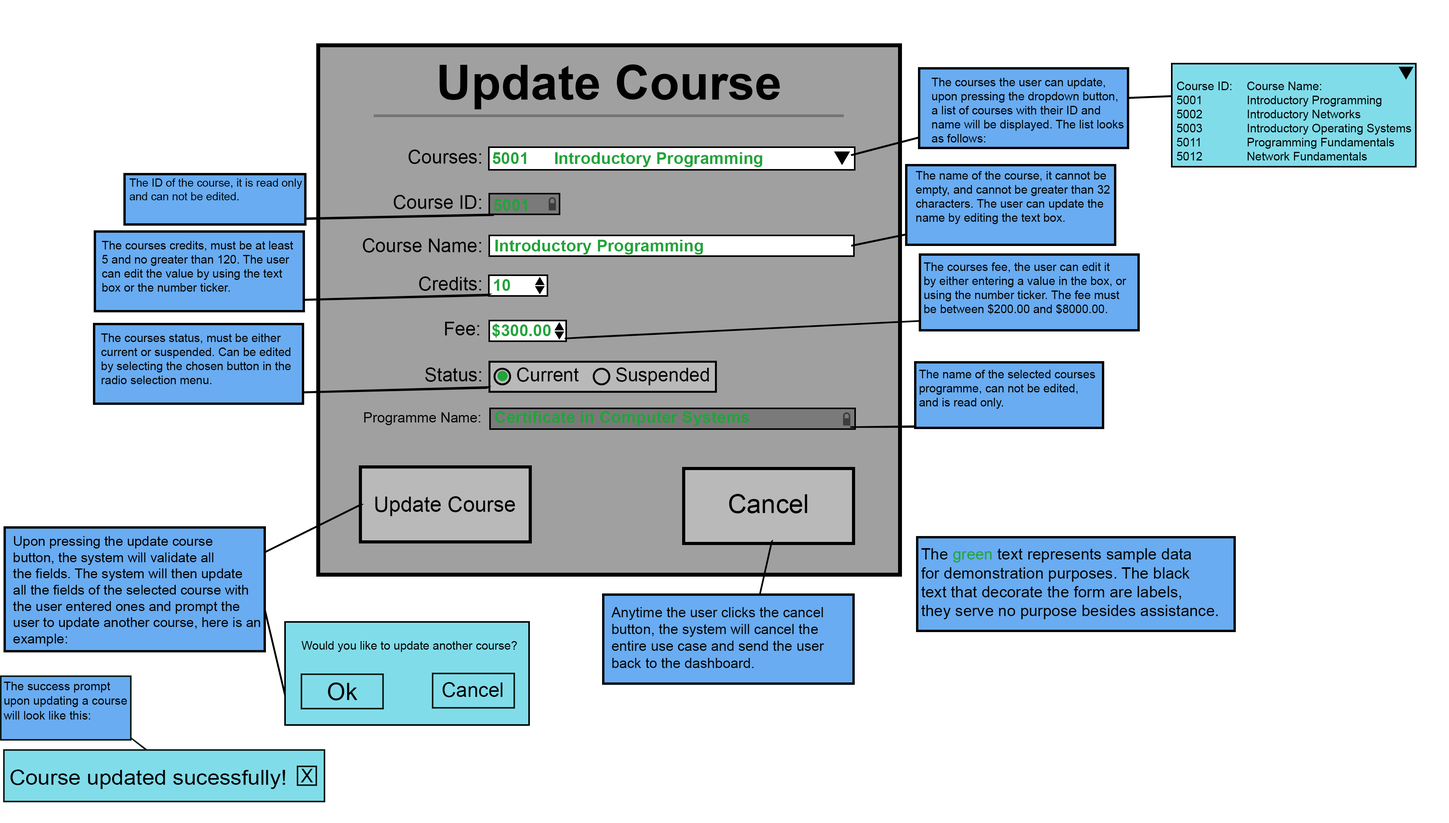
<style>
.page{position:relative;width:1449px;height:823px;background:#ffffff}
.page>*{position:absolute;margin:0}
.t1{font:48.6px "Arial-BoldMT";color:#000000}
.t2{font:11.7px "ArialMT";color:#000000}
.t3{font:18.7px "ArialMT";color:#000000}
.t4{font:16.5px "Arial-BoldMT";color:#21a439}
.t5{font:11.1px "ArialMT";color:#000000}
.t6{font:18.8px "ArialMT";color:#000000}
.t7{font:14.1px "ArialMT";color:#000000}
.t8{font:21.2px "ArialMT";color:#000000}
.t9{font:26px "ArialMT";color:#000000}
.t10{font:13.6px "ArialMT";color:#000000}
.t11{font:15.8px "ArialMT";color:#000000}
.t12{font:15.8px "ArialMT";color:#21a439}
.t13{font:12.3px "ArialMT";color:#000000;scale:0.97 1}
.t14{font:23.9px "ArialMT";color:#000000}
.t15{font:20px "ArialMT";color:#000000}
.t16{font:20.9px "ArialMT";color:#000000;scale:1.06 1}
</style>
<div class="page">
<p class="t1" style="left:439px;top:64px;width:341px;height:45px">Update Course</p>
<p class="t2" style="left:932px;top:78px;width:192px;height:65px">The courses the user can update,<br>upon pressing the dropdown button,<br>a list of courses with their ID and<br>name will be displayed. The list looks<br>as follows:</p>
<p class="t2" style="left:1177px;top:82px;width:234px;height:78px">Course ID:  Course Name:<br>5001    Introductory Programming<br>5002    Introductory Networks<br>5003    Introductory Operating Systems<br>5011    Programming Fundamentals<br>5012    Network Fundamentals</p>
<p class="t3" style="left:408px;top:150px;width:73px;height:14px">Courses:</p>
<p class="t4" style="left:492px;top:152px;width:270px;height:15px">5001   Introductory Programming</p>
<p class="t2" style="left:916px;top:171px;width:194px;height:53px">The name of the course, it cannot be<br>empty, and cannot be greater than 32<br>characters. The user can update the<br>name by editing the text box.</p>
<p class="t5" style="left:129px;top:178px;width:173px;height:22px">The ID of the course, it is read only<br>and can not be edited.</p>
<p class="t3" style="left:394px;top:195px;width:87px;height:14px">Course ID:</p>
<p class="t4" style="left:493px;top:199px;width:34px;height:12px">5001</p>
<p class="t2" style="left:102px;top:241px;width:191px;height:51px">The courses credits, must be at least<br>5 and no greater than 120. The user<br>can edit the value by using the text<br>box or the number ticker.</p>
<p class="t6" style="left:363px;top:238px;width:118px;height:15px">Course Name:</p>
<p class="t4" style="left:495px;top:240px;width:208px;height:15px">Introductory Programming</p>
<p class="t2" style="left:924px;top:262px;width:202px;height:52px">The courses fee, the user can edit it<br>by either entering a value in the box, or<br>using the number ticker. The fee must<br>be between $200.00 and $8000.00.</p>
<p class="t6" style="left:419px;top:276px;width:62px;height:15px">Credits:</p>
<p class="t4" style="left:494px;top:279px;width:16px;height:12px">10</p>
<p class="t6" style="left:445px;top:322px;width:34px;height:13px">Fee:</p>
<p class="t4" style="left:492px;top:324px;width:59px;height:14px">$300.00</p>
<p class="t2" style="left:101px;top:333px;width:190px;height:51px">The courses status, must be either<br>current or suspended. Can be edited<br>by selecting the chosen button in the<br>radio selection menu.</p>
<p class="t3" style="left:425px;top:367px;width:56px;height:15px">Status:</p>
<p class="t3" style="left:517px;top:367px;width:62px;height:15px">Current</p>
<p class="t3" style="left:616px;top:367px;width:93px;height:18px">Suspended</p>
<p class="t2" style="left:919px;top:370px;width:176px;height:39px">The name of the selected courses <br>programme, can not be edited,<br>and is read only.</p>
<p class="t7" style="left:364px;top:412px;width:116px;height:13px">Programme Name:</p>
<p class="t4" style="left:495px;top:411px;width:254px;height:15px">Certificate in Computer Systems</p>
<p class="t8" style="left:375px;top:496px;width:140px;height:20px">Update Course</p>
<p class="t9" style="left:729px;top:494px;width:78px;height:19px">Cancel</p>
<p class="t10" style="left:13px;top:536px;width:247px;height:110px">Upon pressing the update course<br>button, the system will validate all<br>the fields. The system will then update<br>all the fields of the selected course with<br>the user entered ones and prompt the<br>user to update another course, here is an <br>example:</p>
<p class="t11" style="left:921px;top:548px;width:297px;height:71px">The <span class="t12">green </span>text represents sample data<br>for demonstration purposes. The black<br>text that decorate the form are labels,<br>they serve no purpose besides assistance.</p>
<p class="t7" style="left:611px;top:607px;width:213px;height:61px">Anytime the user clicks the cancel<br>button, the system will cancel the<br>entire use case and send the user <br>back to the dashboard.</p>
<p class="t2" style="left:301px;top:641px;width:216px;height:11px">Would you like to update another course?</p>
<p class="t13" style="left:4px;top:682px;width:123px;height:38px">The success prompt<br>upon updating a course<br>will look like this:</p>
<p class="t14" style="left:328px;top:682px;width:30px;height:18px">Ok</p>
<p class="t15" style="left:442px;top:682px;width:60px;height:15px">Cancel</p>
<p class="t16" style="left:10px;top:770px;width:275px;height:19px">Course updated sucessfully!</p>
<p class="t3" style="left:301px;top:769px;width:12px;height:13px">X</p>
</div>
